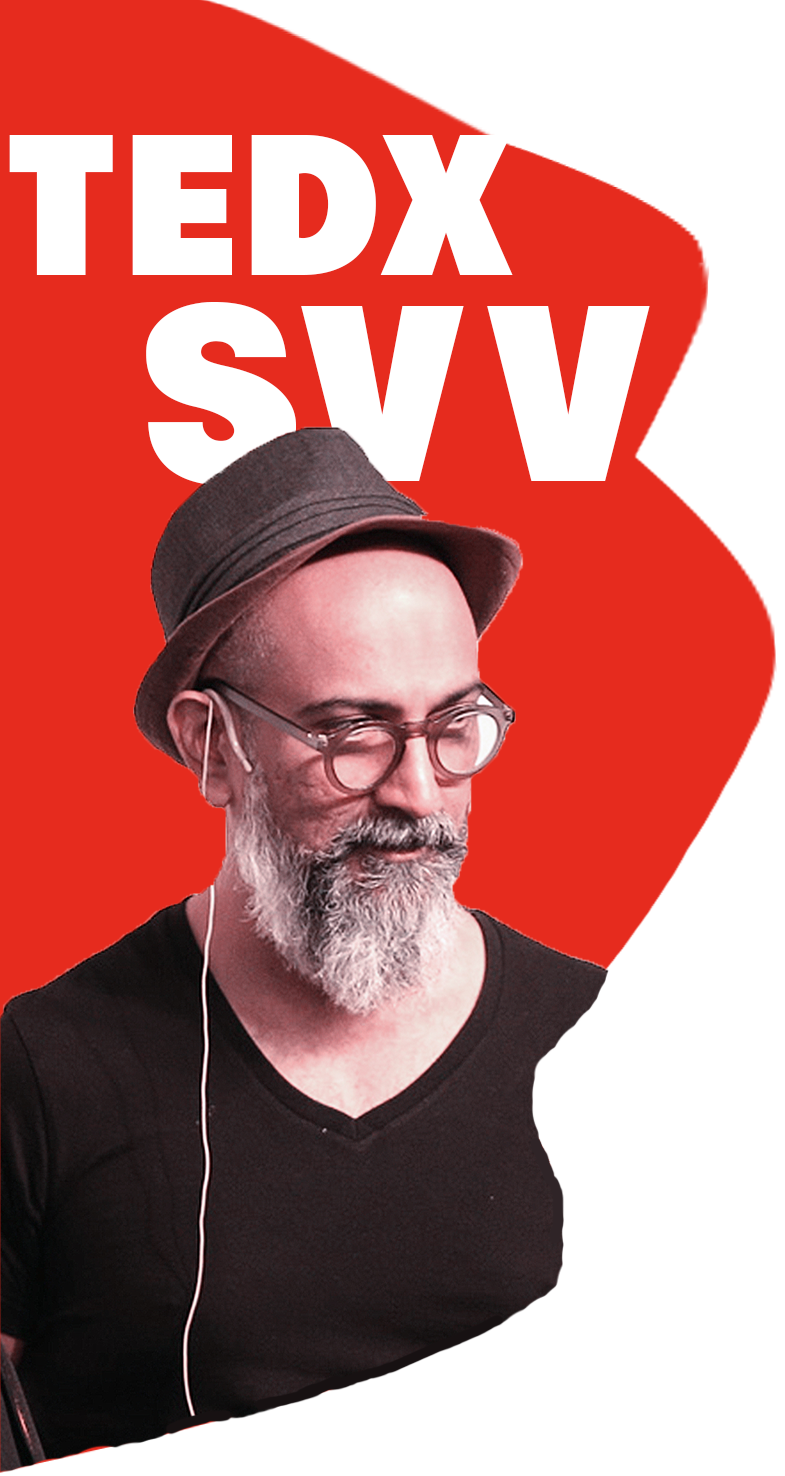
<style>
.page{position:relative;width:785px;height:1476px;background:#ffffff}
.page>*{position:absolute;margin:0}
.t1{font:200px "RACE1BranntNCV";color:#ffffff}
.t2{font:250px "RACE1BranntNCV";color:#ffffff}
</style>
<div class="page">
<p class="t1" style="left:9px;top:135px;width:504px;height:140px">tedx</p>
<p class="t2" style="left:146px;top:302px;width:504px;height:183px">svv</p>
</div>
